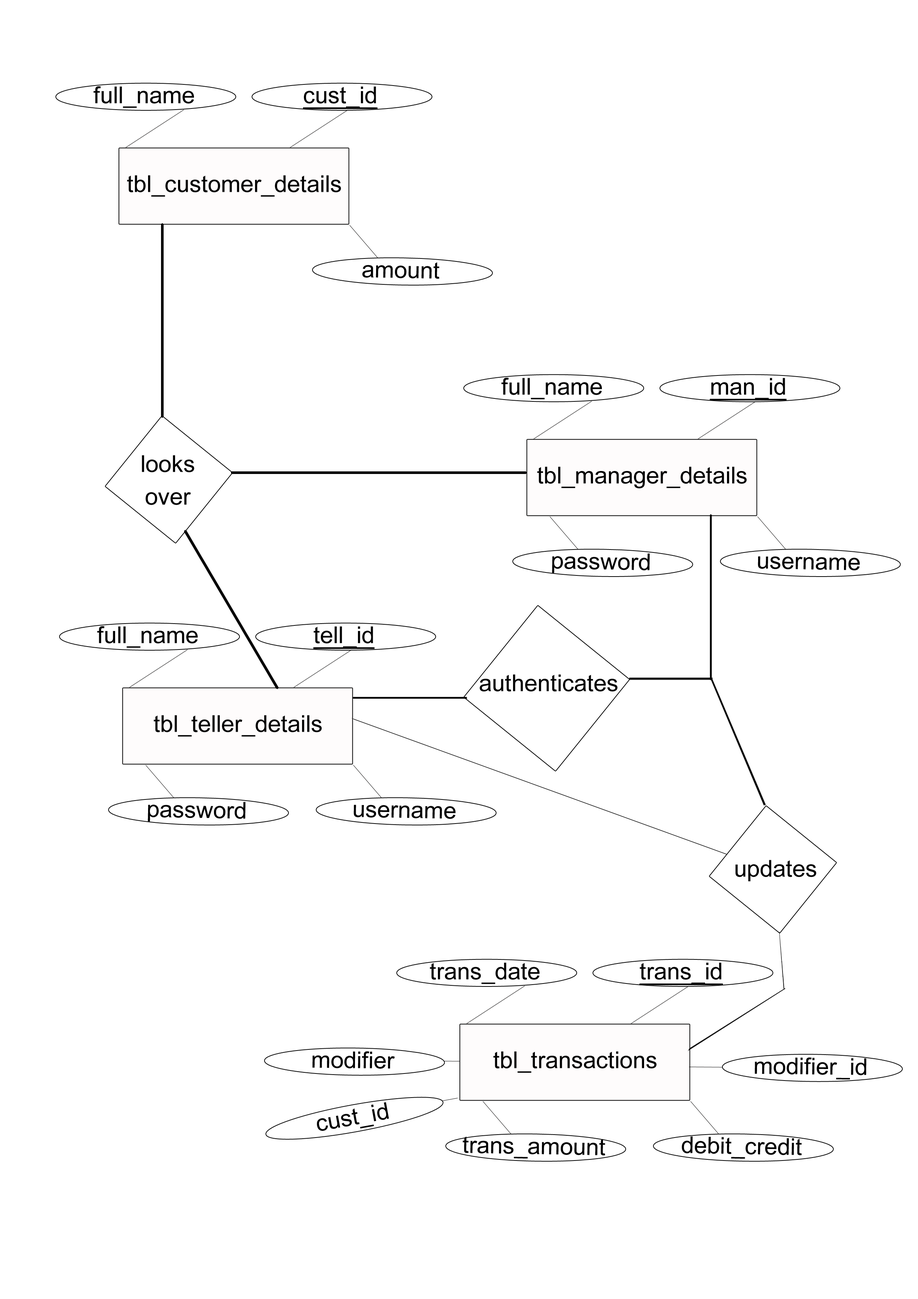
<style>
.page{position:relative;width:918px;height:1299px;background:#ffffff}
.page>*{position:absolute;margin:0}
.t1{font:23.2px "ArialMT";color:#010101}
.t2{font:23.2px "ArialMT";color:#010101;text-decoration:underline}
.t3{font:23.2px/32.6px "ArialMT";color:#010101}
</style>
<div class="page">
<p class="t1" style="left:93px;top:86px;width:101px;height:22px">full_name</p>
<p class="t2" style="left:303px;top:86px;width:75px;height:23px">cust_id</p>
<p class="t1" style="left:127px;top:175px;width:214px;height:22px">tbl_customer_details</p>
<p class="t1" style="left:362px;top:262px;width:77px;height:17px;rotate:1deg">amount</p>
<p class="t1" style="left:501px;top:378px;width:101px;height:21px">full_name</p>
<p class="t2" style="left:710px;top:378px;width:77px;height:23px">man_id</p>
<p class="t3" style="left:142px;top:455px;width:52px;height:50px;text-align:center">looks<br>over</p>
<p class="t1" style="left:537px;top:466px;width:210px;height:22px">tbl_manager_details</p>
<p class="t1" style="left:552px;top:553px;width:98px;height:20px;rotate:1deg">password</p>
<p class="t1" style="left:758px;top:556px;width:102px;height:15px;rotate:1deg">username</p>
<p class="t1" style="left:97px;top:626px;width:101px;height:22px">full_name</p>
<p class="t2" style="left:313px;top:626px;width:62px;height:23px">tell_id</p>
<p class="t1" style="left:480px;top:674px;width:138px;height:18px">authenticates</p>
<p class="t1" style="left:154px;top:715px;width:168px;height:21px">tbl_teller_details</p>
<p class="t1" style="left:148px;top:802px;width:98px;height:20px;rotate:1deg">password</p>
<p class="t1" style="left:354px;top:804px;width:102px;height:15px;rotate:1deg">username</p>
<p class="t1" style="left:736px;top:860px;width:80px;height:21px">updates</p>
<p class="t1" style="left:430px;top:962px;width:110px;height:22px">trans_date</p>
<p class="t2" style="left:639px;top:962px;width:84px;height:23px">trans_id</p>
<p class="t1" style="left:312px;top:1051px;width:83px;height:17px;rotate:1deg">modifier</p>
<p class="t1" style="left:494px;top:1051px;width:163px;height:22px">tbl_transactions</p>
<p class="t1" style="left:755px;top:1057px;width:112px;height:22px;rotate:1deg">modifier_id</p>
<p class="t1" style="left:317px;top:1102px;width:72px;height:29px;rotate:-10deg">cust_id</p>
<p class="t1" style="left:463px;top:1136px;width:142px;height:22px;rotate:1deg">trans_amount</p>
<p class="t1" style="left:682px;top:1136px;width:120px;height:22px;rotate:1deg">debit_credit</p>
</div>
